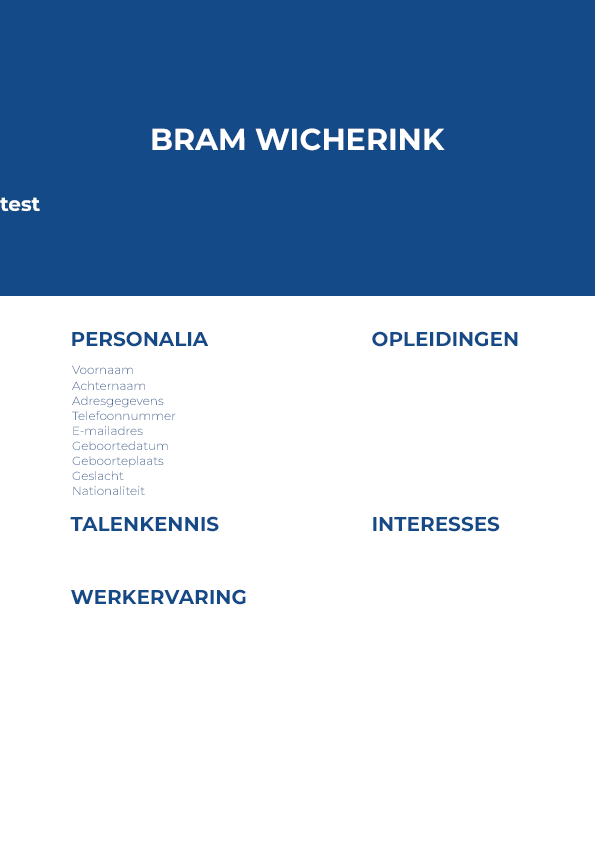
<style>
.page{position:relative;width:595px;height:842px;background:#ffffff}
.page>*{position:absolute;margin:0}
.t1{font:30px "Montserrat-Bold";color:#ffffff}
.t2{font:20px "Montserrat-Bold";color:#ffffff}
.t3{font:20px "Montserrat-Bold";color:#144a87}
.t4{font:12px "Montserrat-Light"}
</style>
<div class="page">
<p class="t1" style="left:152px;top:128px;width:293px;height:23px">BRAM WICHERINK</p>
<p class="t2" style="left:0px;top:197px;width:40px;height:15px">test</p>
<p class="t3" style="left:72px;top:331px;width:137px;height:16px">PERSONALIA</p>
<p class="t3" style="left:372px;top:331px;width:146px;height:16px">OPLEIDINGEN</p>
<p class="t4" style="left:72px;top:365px;width:61px;height:9px">Voornaam</p>
<p class="t4" style="left:72px;top:381px;width:73px;height:9px">Achternaam</p>
<p class="t4" style="left:72px;top:396px;width:92px;height:12px">Adresgegevens</p>
<p class="t4" style="left:72px;top:411px;width:104px;height:9px">Telefoonnummer</p>
<p class="t4" style="left:73px;top:426px;width:70px;height:9px">E-mailadres</p>
<p class="t4" style="left:72px;top:441px;width:96px;height:9px">Geboortedatum</p>
<p class="t4" style="left:72px;top:456px;width:92px;height:12px">Geboorteplaats</p>
<p class="t4" style="left:72px;top:471px;width:52px;height:9px">Geslacht</p>
<p class="t4" style="left:73px;top:486px;width:72px;height:9px">Nationaliteit</p>
<p class="t3" style="left:70px;top:516px;width:149px;height:16px">TALENKENNIS</p>
<p class="t3" style="left:373px;top:516px;width:127px;height:16px">INTERESSES</p>
<p class="t3" style="left:71px;top:589px;width:175px;height:16px">WERKERVARING</p>
</div>
